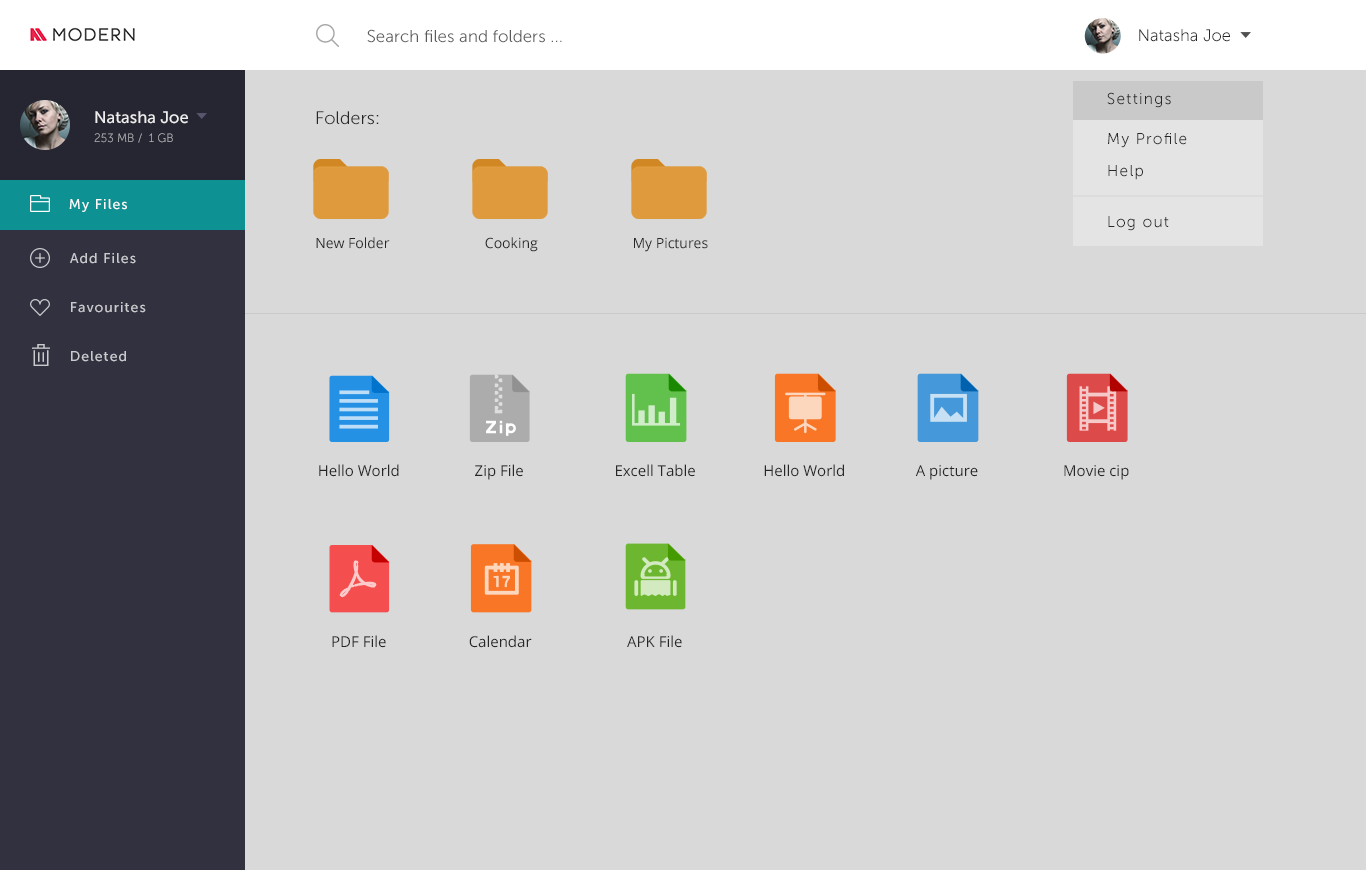
<style>
.page{position:relative;width:1366px;height:870px;background:#d9d9d9}
.page>*{position:absolute;margin:0}
.t1{font:16.9px "MuseoSans-300";color:#5a5a5a}
.t2{font:16.7px "MuseoSans-300";color:#272727}
.t3{font:15.7px "MuseoSans-300";letter-spacing:0.075em;color:#272727}
.t4{font:16.7px "MuseoSans-500";color:#ffffff}
.t5{font:18px "MuseoSans-300";color:#272727}
.t6{font:11.9px "MuseoSans-300"}
.t7{font:14px "MuseoSans-500";letter-spacing:0.075em;color:#ffffff}
.t8{font:14px "OpenSans";color:#272727}
.t9{font:14px "MuseoSans-500";letter-spacing:0.075em;color:#cbcbcf}
.t10{font:15px "OpenSans";color:#272727}
</style>
<div class="page">
<p class="t1" style="left:367px;top:29px;width:195px;height:14px">Search files and folders ...</p>
<p class="t2" style="left:1139px;top:29px;width:91px;height:13px">Natasha Joe</p>
<p class="t3" style="left:1107px;top:92px;width:64px;height:16px">Settings</p>
<p class="t4" style="left:95px;top:111px;width:93px;height:13px;opacity:0.89">Natasha Joe</p>
<p class="t5" style="left:316px;top:111px;width:63px;height:14px">Folders:</p>
<p class="t6" style="left:94px;top:133px;width:79px;height:10px">253 MB /  1 GB</p>
<p class="t3" style="left:1108px;top:133px;width:79px;height:15px">My Profile</p>
<p class="t3" style="left:1108px;top:165px;width:35px;height:15px">Help</p>
<p class="t7" style="left:69px;top:199px;width:58px;height:13px">My Files</p>
<p class="t3" style="left:1108px;top:216px;width:61px;height:15px">Log out</p>
<p class="t8" style="left:316px;top:237px;width:74px;height:12px">New Folder</p>
<p class="t8" style="left:485px;top:237px;width:53px;height:15px">Cooking</p>
<p class="t8" style="left:634px;top:237px;width:74px;height:15px">My Pictures</p>
<p class="t9" style="left:70px;top:253px;width:66px;height:11px">Add Files</p>
<p class="t9" style="left:71px;top:302px;width:75px;height:11px">Favourites</p>
<p class="t9" style="left:71px;top:351px;width:55px;height:11px">Deleted</p>
<p class="t10" style="left:319px;top:464px;width:80px;height:13px">Hello World</p>
<p class="t10" style="left:475px;top:464px;width:48px;height:16px">Zip File</p>
<p class="t10" style="left:616px;top:464px;width:79px;height:13px">Excell Table</p>
<p class="t10" style="left:764px;top:464px;width:80px;height:13px">Hello World</p>
<p class="t10" style="left:915px;top:465px;width:63px;height:15px">A picture</p>
<p class="t10" style="left:1064px;top:465px;width:65px;height:15px">Movie cip</p>
<p class="t10" style="left:332px;top:635px;width:54px;height:13px">PDF File</p>
<p class="t10" style="left:469px;top:635px;width:63px;height:13px">Calendar</p>
<p class="t10" style="left:627px;top:635px;width:55px;height:13px">APK File</p>
</div>
